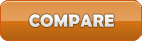
<style>
.page{position:relative;width:142px;height:41px}
.page>*{position:absolute;margin:0}
.t1{font:18px "BerlinSansFBDemi-Bold";color:#ffffff}
</style>
<div class="page">
<p class="t1" style="left:29px;top:14px;width:85px;height:13px">COMPARE</p>
</div>
